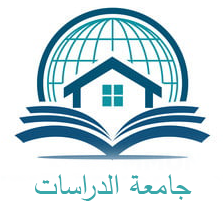
<style>
.page{position:relative;width:223px;height:212px;background:#ffffff}
.page>*{position:absolute;margin:0}
.t1{font:32px "SimplifiedArabic";color:#38a8aa}
</style>
<div class="page">
<p class="t1" style="left:35px;top:174px;width:157px;height:27px">جامعة الدراسات</p>
</div>
